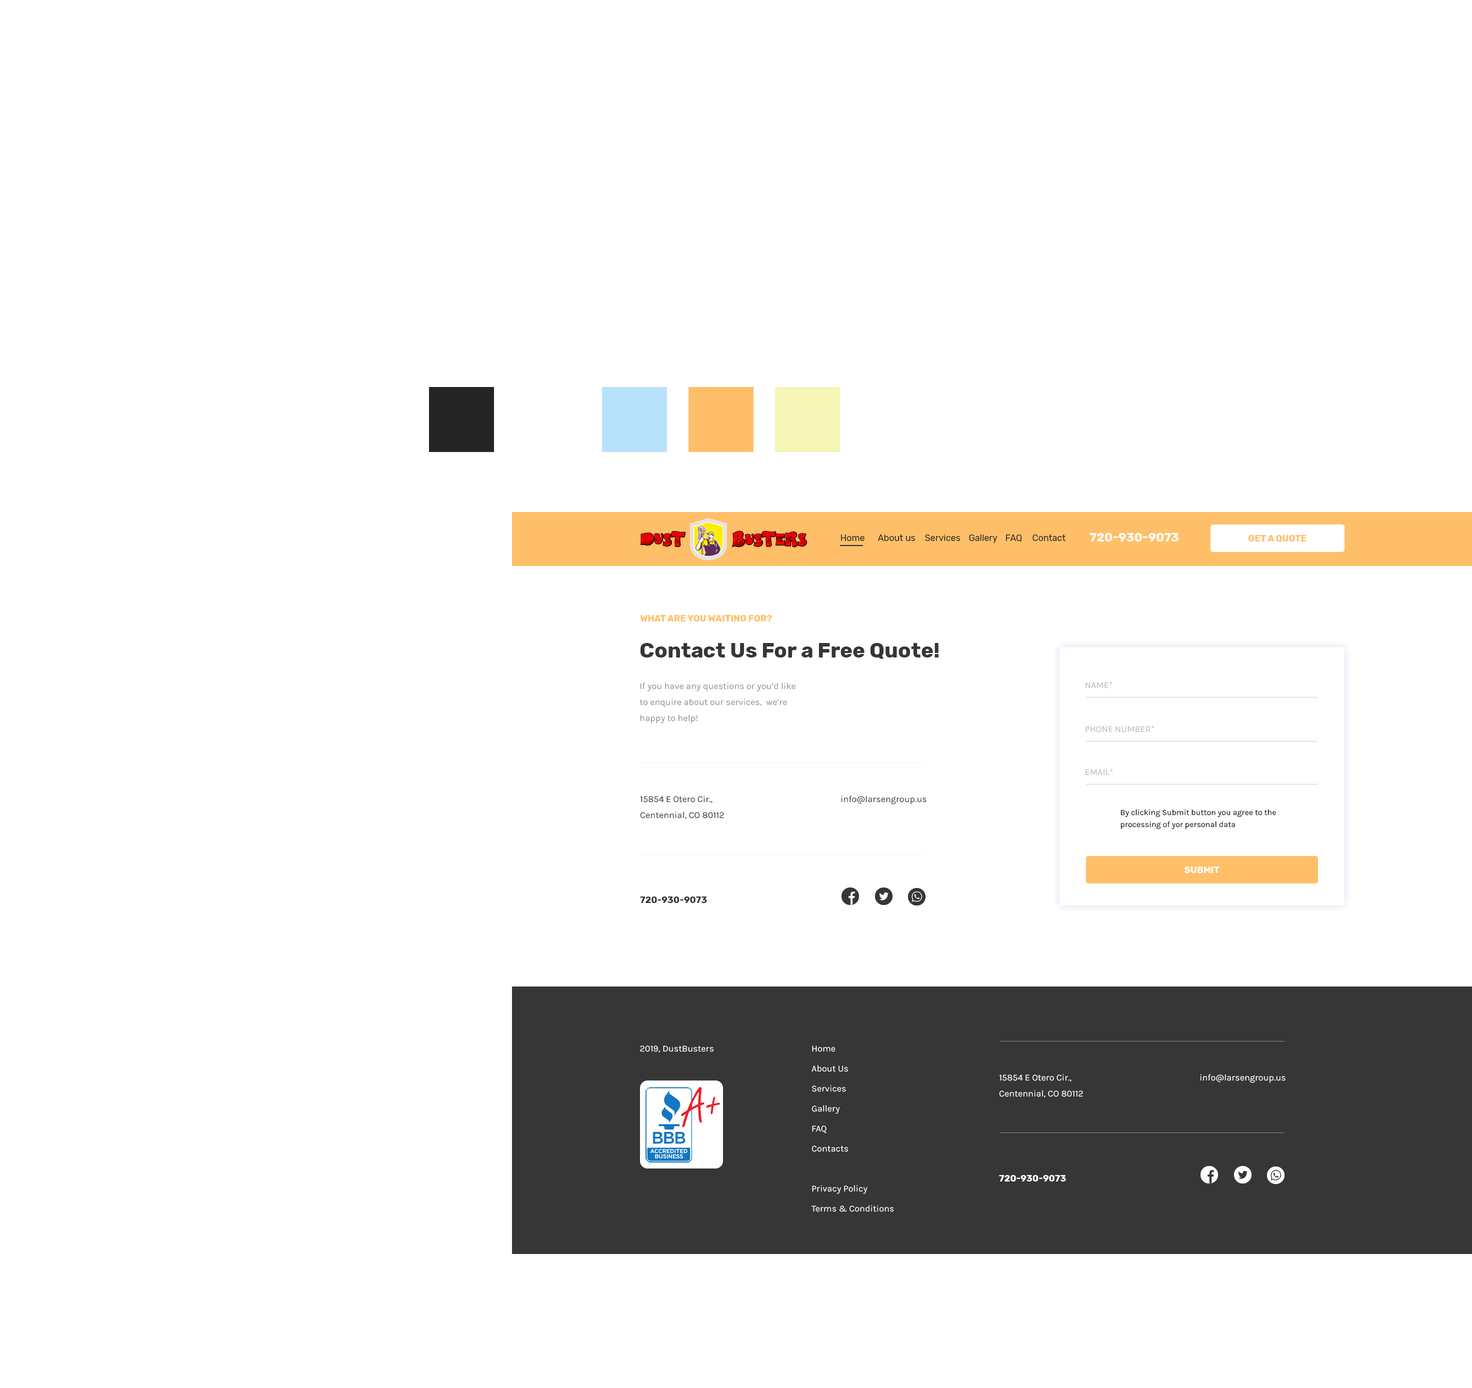
<style>
.page{position:relative;width:1472px;height:1388px;background:#ffffff}
.page>*{position:absolute;margin:0}
.t1{font:12px "Rubik-Bold";color:#ffffff;text-transform:uppercase}
.t2{font:9px "Rubik-Regular";color:#252525}
.t3{font:9px "Rubik-Bold";color:#ffbf68;text-transform:uppercase}
.t4{font:21px "Rubik-Bold";color:#363636}
.t5{font:9px/16px "Karla-Regular";color:#909090}
.t6{font:9px "Karla-Regular";color:#babbbf;text-transform:uppercase}
.t7{font:9px/16.1px "Karla-Regular";color:#363636}
.t8{font:9px "Karla-Regular";color:#363636}
.t9{font:8px/12px "Karla-Regular";color:#111111}
.t10{font:9px "Rubik-Bold";color:#ffffff;text-transform:uppercase}
.t11{font:9px "Rubik-Bold";color:#363636;text-transform:uppercase}
.t12{font:9px "Karla-Regular";color:#ffffff}
.t13{font:9px/20px "Karla-Regular";color:#ffffff}
.t14{font:9px/16.1px "Karla-Regular";color:#ffffff}
</style>
<div class="page">
<p class="t1" style="left:1090px;top:533px;width:88px;height:9px">720-930-9073</p>
<p class="t2" style="left:841px;top:534px;width:23px;height:7px">Home</p>
<p class="t2" style="left:878px;top:534px;width:37px;height:7px">About us</p>
<p class="t2" style="left:925px;top:534px;width:35px;height:7px">Services</p>
<p class="t2" style="left:969px;top:534px;width:29px;height:9px">Gallery</p>
<p class="t2" style="left:1006px;top:534px;width:16px;height:8px">FAQ</p>
<p class="t2" style="left:1032px;top:534px;width:34px;height:7px">Contact</p>
<p class="t3" style="left:1248px;top:535px;width:58px;height:7px">Get a Quote</p>
<p class="t3" style="left:640px;top:615px;width:132px;height:7px">what are you waiting for?</p>
<p class="t4" style="left:640px;top:643px;width:298px;height:16px">Contact Us For a Free Quote!</p>
<p class="t5" style="left:640px;top:682px;width:156px;height:42px">If you have any questions or you’d like to enquire about our services,  we’re happy to help!</p>
<p class="t6" style="left:1086px;top:682px;width:26px;height:6px">Name*</p>
<p class="t6" style="left:1086px;top:726px;width:68px;height:6px">phone number*</p>
<p class="t6" style="left:1086px;top:768px;width:27px;height:8px">Email*</p>
<p class="t7" style="left:640px;top:796px;width:84px;height:23px">15854 E Otero Cir.,<br>Centennial, CO 80112</p>
<p class="t8" style="left:841px;top:796px;width:85px;height:8px">info@larsengroup.us</p>
<p class="t9" style="left:1120px;top:809px;width:156px;height:21px">By clicking Submit button you agree to the processing of yor personal data</p>
<p class="t10" style="left:1184px;top:866px;width:36px;height:7px">submit</p>
<p class="t11" style="left:640px;top:896px;width:67px;height:7px">720-930-9073</p>
<p class="t12" style="left:640px;top:1046px;width:74px;height:6px">© 2019, DustBusters</p>
<p class="t13" style="left:811px;top:1046px;width:83px;height:166px">Home<br>About Us<br>Services<br>Gallery<br>FAQ<br>Contacts<br><br>Privacy Policy<br>Terms &amp; Conditions</p>
<p class="t14" style="left:999px;top:1074px;width:84px;height:24px">15854 E Otero Cir.,<br>Centennial, CO 80112</p>
<p class="t12" style="left:1200px;top:1074px;width:86px;height:9px">info@larsengroup.us</p>
<p class="t10" style="left:999px;top:1175px;width:67px;height:7px">720-930-9073</p>
</div>
